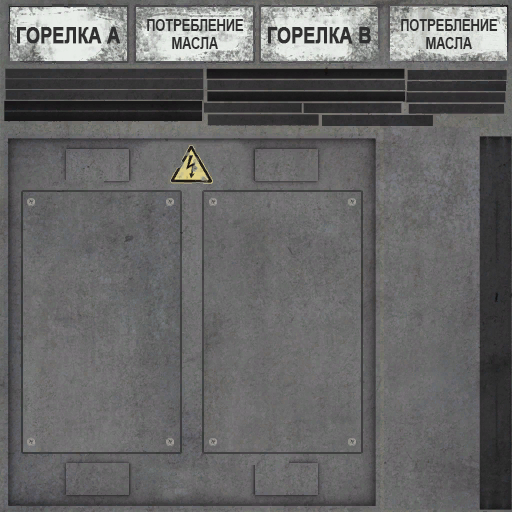
<style>
.page{position:relative;width:512px;height:512px}
.page>*{position:absolute;margin:0}
.t1{font:22px "Arial-BoldMT";color:#303030;font-weight:bold;scale:0.8 1}
.t2{font:16px/18px "Arial-BoldMT";color:#303030;scale:0.8 1}
</style>
<div class="page">
<p class="t1" style="left:17px;top:27px;width:104px;height:17px">ГОРЕЛКА А</p>
<p class="t2" style="left:147px;top:19px;width:97px;height:30px;text-align:center">ПОТРЕБЛЕНИЕ<br>МАСЛА</p>
<p class="t1" style="left:268px;top:27px;width:103px;height:17px">ГОРЕЛКА В</p>
<p class="t2" style="left:401px;top:19px;width:97px;height:30px;text-align:center">ПОТРЕБЛЕНИЕ<br>МАСЛА</p>
</div>
